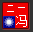
<style>
.page{position:relative;width:33px;height:32px;background:#f20000}
.page>*{position:absolute;margin:0}
.t1{font:10.4px "SimSun";color:#ffffff}
.t2{font:11.7px "SimSun";color:#ffffff}
</style>
<div class="page">
<p class="t1" style="left:7px;top:5px;width:18px;height:7px">二一</p>
<p class="t2" style="left:16px;top:15px;width:11px;height:12px">冯</p>
</div>
